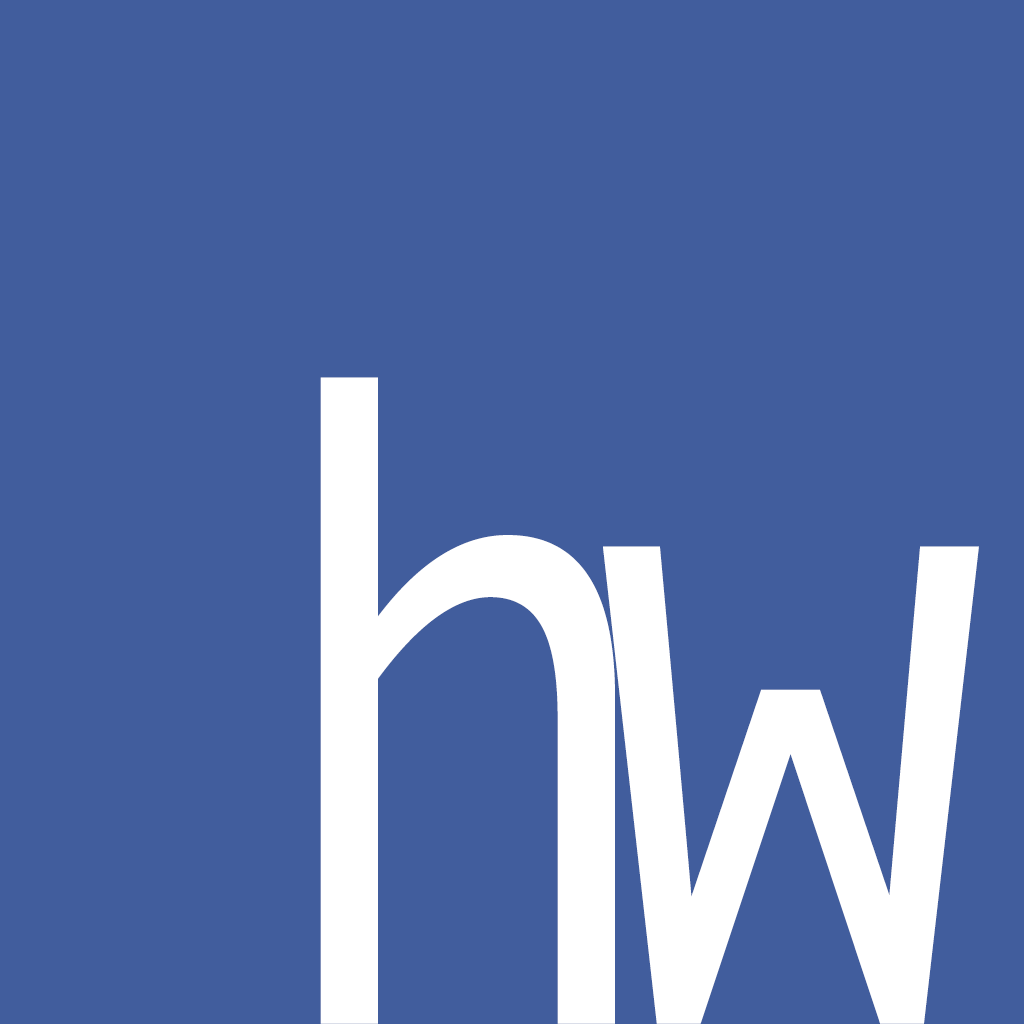
<style>
.page{position:relative;width:1024px;height:1024px;background:#415d9d}
.page>*{position:absolute;margin:0}
.t1{font:937.5px "AndaleMono";letter-spacing:-0.175em;color:#ffffff;scale:0.8 1}
</style>
<div class="page">
<p class="t1" style="left:320px;top:377px;width:659px;height:647px">hw</p>
</div>
